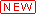
<style>
.page{position:relative;width:36px;height:14px;background:#ffffff}
.page>*{position:absolute;margin:0}
.t1{font:11px "ArialMT";letter-spacing:0.2em;color:#df0000}
</style>
<div class="page">
<p class="t1" style="left:4px;top:2px;width:30px;height:13px">NEW</p>
</div>
